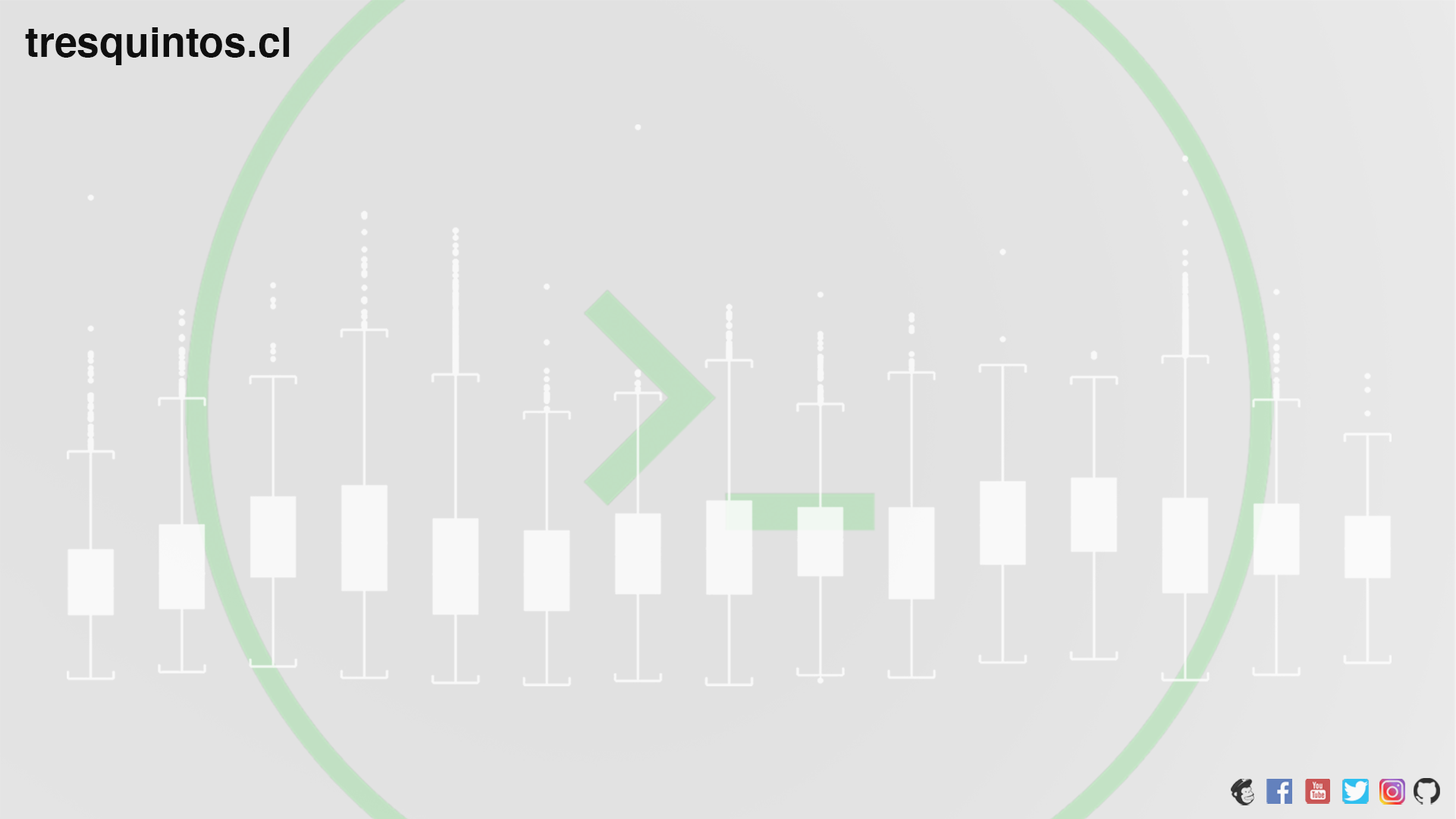
<style>
.page{position:relative;width:1456px;height:819px;background:#e1e1e1}
.page>*{position:absolute;margin:0}
.t1{font:40.7px "Helvetica-Bold";color:#000000}
</style>
<div class="page">
<p class="t1" style="left:25px;top:27px;width:265px;height:38px;opacity:0.97">tresquintos.cl</p>
</div>
